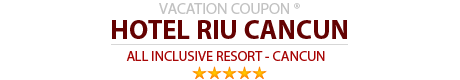
<style>
.page{position:relative;width:460px;height:80px;background:#ffffff}
.page>*{position:absolute;margin:0}
.t1{font:15.8px "MyriadPro-Regular";color:#c2c2c2}
.t2{font:26.9px "MyriadPro-Bold";color:#640202}
.t3{font:14.2px "MyriadPro-Regular";color:#a70505}
</style>
<div class="page">
<p class="t1" style="left:159px;top:3px;width:141px;height:11px">VACATION COUPON ®</p>
<p class="t2" style="left:112px;top:20px;width:235px;height:19px">HOTEL RIU CANCUN</p>
<p class="t3" style="left:126px;top:51px;width:199px;height:10px">ALL INCLUSIVE RESORT - CANCUN</p>
</div>
